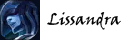
<style>
.page{position:relative;width:140px;height:40px;background:#ffffff}
.page>*{position:absolute;margin:0}
.t1{font:12px "VinerHandITC";color:#000000}
</style>
<div class="page">
<p class="t1" style="left:47px;top:12px;width:74px;height:18px">Lissandra</p>
</div>
